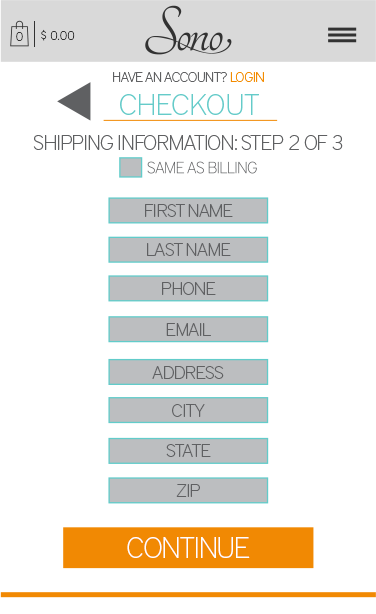
<style>
.page{position:relative;width:376px;height:614px;background:#ffffff}
.page>*{position:absolute;margin:0}
.t1{font:12.4px "DistrictPro-Thin";color:#323232}
.t2{font:14px "DistrictPro-Thin";letter-spacing:-0.031em;color:#5f6062}
.t3{font:14px "DistrictPro-Thin";letter-spacing:-0.031em;color:#f38b00}
.t4{font:30px "DistrictPro-Thin";color:#65cbc9}
.t5{font:21px "DistrictPro-Thin";letter-spacing:-0.031em;color:#5f6062}
.t6{font:18.5px "DistrictPro-Thin";letter-spacing:-0.031em;color:#5f6062}
.t7{font:29px "DistrictPro-Thin";letter-spacing:-0.031em;color:#ffffff}
</style>
<div class="page">
<p class="t1" style="left:41px;top:29px;width:34px;height:12px">$ 0.00</p>
<p class="t1" style="left:16px;top:32px;width:7px;height:9px">0</p>
<p class="t2" style="left:113px;top:72px;width:151px;height:10px">HAVE AN ACCOUNT? <span class="t3">LOGIN</span></p>
<p class="t4" style="left:120px;top:94px;width:139px;height:21px">CHECKOUT</p>
<p class="t5" style="left:33px;top:135px;width:310px;height:15px">SHIPPING INFORMATION: STEP 2 OF 3</p>
<p class="t6" style="left:145px;top:204px;width:88px;height:13px">FIRST NAME</p>
<p class="t6" style="left:147px;top:243px;width:84px;height:13px">LAST NAME</p>
<p class="t6" style="left:162px;top:282px;width:54px;height:13px">PHONE</p>
<p class="t6" style="left:166px;top:323px;width:45px;height:13px">EMAIL</p>
<p class="t6" style="left:152px;top:366px;width:72px;height:13px">ADDRESS</p>
<p class="t6" style="left:172px;top:404px;width:33px;height:13px">CITY</p>
<p class="t6" style="left:166px;top:444px;width:45px;height:13px">STATE</p>
<p class="t6" style="left:176px;top:484px;width:24px;height:13px">ZIP</p>
<p class="t7" style="left:127px;top:537px;width:123px;height:21px">CONTINUE</p>
</div>
